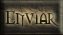
<style>
.page{position:relative;width:63px;height:35px}
.page>*{position:absolute;margin:0}
.t1{font:17px "Morpheus";color:#2d1b02}
</style>
<div class="page">
<p class="t1" style="left:5px;top:11px;width:55px;height:16px">Enviar</p>
</div>
